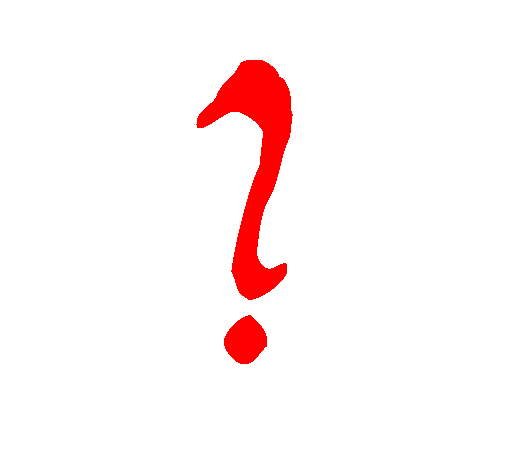
<style>
.page{position:relative;width:508px;height:473px;background:#ffffff}
.page>*{position:absolute;margin:0}
.t1{font:328px "HamletOrNot";color:#ff0000}
</style>
<div class="page">
<p class="t1" style="left:196px;top:60px;width:97px;height:304px">?</p>
</div>
